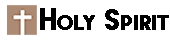
<style>
.page{position:relative;width:170px;height:42px;background:#ffffff}
.page>*{position:absolute;margin:0}
.t1{font:27.2px "LemonMilk";letter-spacing:-0.005em;color:#000000;font-variant:small-caps;font-weight:bold}
</style>
<div class="page">
<p class="t1" style="left:40px;top:8px;width:129px;height:22px">Holy Spirit</p>
</div>
